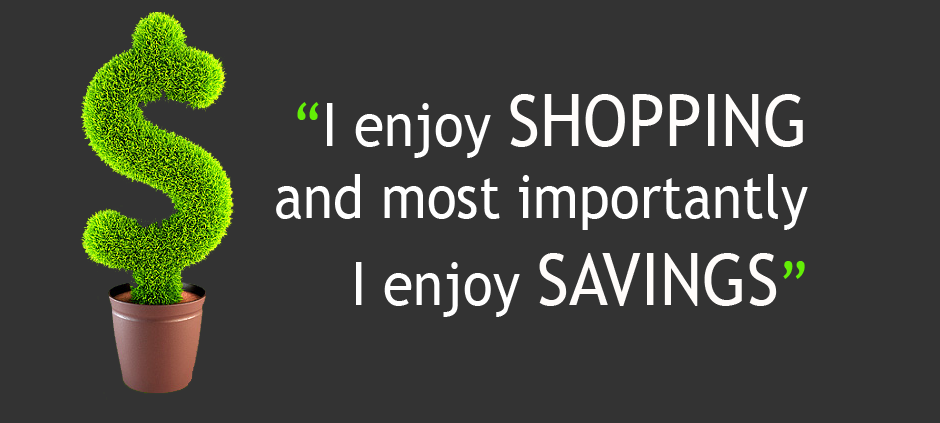
<style>
.page{position:relative;width:940px;height:423px;background:#333333}
.page>*{position:absolute;margin:0}
.t1{font:60px "TrebuchetMS";color:#ffffff;scale:0.92 1}
.t2{font:60px "TrebuchetMS";color:#63ee06;scale:0.92 1}
.t3{font:72px "TrebuchetMS";color:#fffdfb;scale:0.92 1}
.t4{font:72px "TrebuchetMS";color:#fffcfa;scale:0.92 1}
</style>
<div class="page">
<p class="t1" style="left:276px;top:94px;width:532px;height:223px;text-align:right"><span class="t2">“</span>I enjoy <span class="t3">SHOPPING<br></span>and most importantly<br>I enjoy <span class="t4">SAVINGS</span><span class="t2">”</span></p>
</div>
